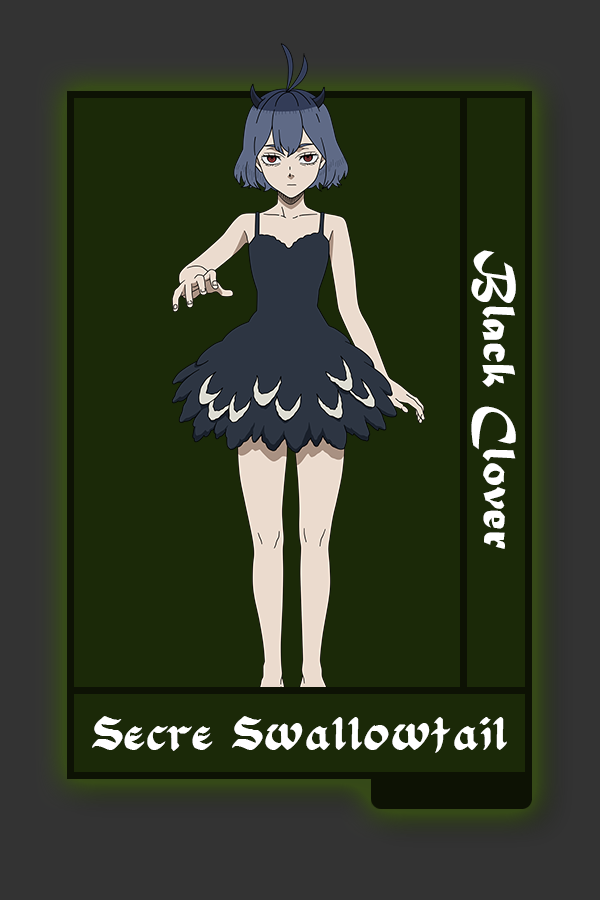
<style>
.page{position:relative;width:600px;height:900px;background:#1b2908}
.page>*{position:absolute;margin:0}
.t1{font:48.8px "MaturaMTScriptCapitals";color:#ffffff}
.t2{font:40px "FloranteatLaura";color:#ffffff}
</style>
<div class="page">
<p class="t1" style="left:471px;top:250px;width:45px;height:299px;rotate:90deg">Black Clover</p>
<p class="t2" style="left:92px;top:716px;width:415px;height:37px">Secre Swallowtail</p>
</div>
